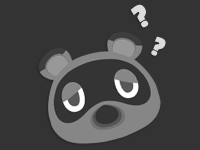
<style>
.page{position:relative;width:200px;height:150px;background:#333333}
.page>*{position:absolute;margin:0}
.t1{font:36px "PassionOne-Bold";color:#dcdcdc}
.t2{font:30px "PassionOne-Bold";color:#dcdcdc}
</style>
<div class="page">
<p class="t1" style="left:130px;top:4px;width:19px;height:24px;rotate:-30deg">?</p>
<p class="t2" style="left:151px;top:36px;width:15px;height:20px;rotate:24deg">?</p>
</div>
